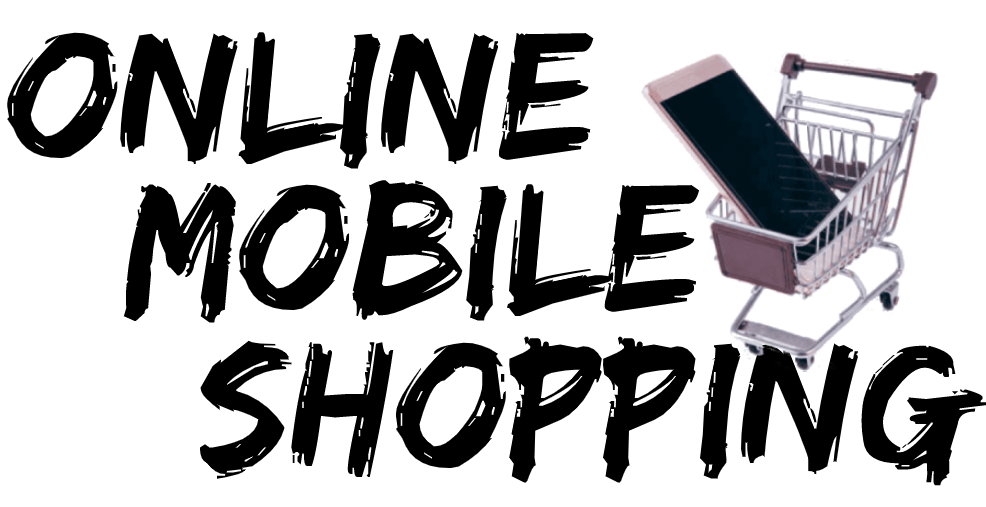
<style>
.page{position:relative;width:986px;height:507px;background:#ffffff}
.page>*{position:absolute;margin:0}
.t1{font:188.9px "Edo";color:#000000}
</style>
<div class="page">
<p class="t1" style="left:7px;top:32px;width:587px;height:137px">Online</p>
<p class="t1" style="left:123px;top:180px;width:577px;height:143px">Mobile</p>
<p class="t1" style="left:199px;top:336px;width:788px;height:150px">Shopping</p>
</div>
